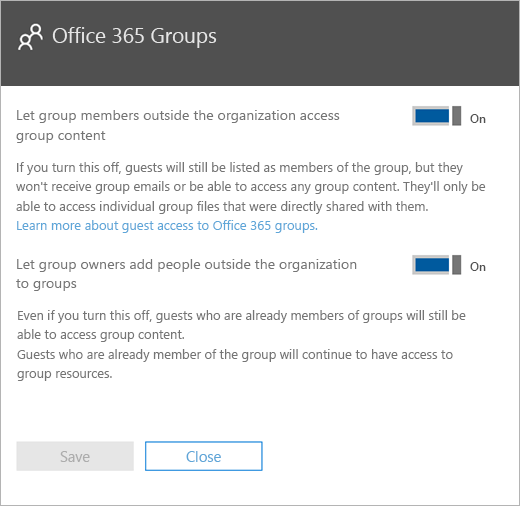
<style>
.page{position:relative;width:520px;height:506px;background:#ffffff}
.page>*{position:absolute;margin:0}
.t1{font:20.7px "SegoeUI";color:#e6e6e6}
.t2{font:14.2px/20px "SegoeUI";color:#757575}
.t3{font:12px "SegoeUI-Semibold";color:#505050}
.t4{font:13px/19.3px "SegoeUI";color:#757575}
.t5{font:13px/19.3px "SegoeUI";color:#5ea6d8}
.t6{font:14.2px/18.7px "SegoeUI";color:#757575}
.t7{font:12.9px/18.7px "SegoeUI";color:#757575}
.t8{font:14.7px "SegoeUI";color:#adadad}
.t9{font:14.7px "SegoeUI";color:#5ea6d8}
</style>
<div class="page">
<p class="t1" style="left:52px;top:27px;width:165px;height:21px">Office 365 Groups</p>
<p class="t2" style="left:16px;top:110px;width:324px;height:33px">Let group members outside the organization access<br>group content</p>
<p class="t3" style="left:470px;top:114px;width:16px;height:9px">On</p>
<p class="t4" style="left:16px;top:162px;width:470px;height:71px">If you turn this off, guests will still be listed as members of the group, but they<br>won't receive group emails or be able to access any group content. They'll only be<br>able to access individual group files that were directly shared with them.<br><span class="t5">Learn more about guest access to Office 365 groups.</span></p>
<p class="t6" style="left:16px;top:259px;width:341px;height:32px">Let group owners add people outside the organization<br>to groups</p>
<p class="t3" style="left:470px;top:262px;width:16px;height:9px">On</p>
<p class="t7" style="left:17px;top:310px;width:449px;height:32px">Even if you turn this off, guests who are already members of groups will still be<br>able to access group content.</p>
<p class="t7" style="left:17px;top:349px;width:436px;height:32px">Guests who are already member of the group will continue to have access to<br>group resources.</p>
<p class="t8" style="left:60px;top:451px;width:30px;height:11px">Save</p>
<p class="t9" style="left:186px;top:451px;width:35px;height:11px">Close</p>
</div>
